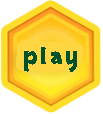
<style>
.page{position:relative;width:103px;height:114px;background:#ffffff}
.page>*{position:absolute;margin:0}
.t1{font:22px "Skranji-Bold";letter-spacing:0.15em;color:#01512b}
</style>
<div class="page">
<p class="t1" style="left:24px;top:47px;width:53px;height:25px">play</p>
</div>
